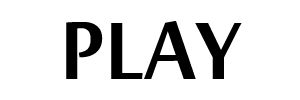
<style>
.page{position:relative;width:300px;height:100px;background:#ffffff}
.page>*{position:absolute;margin:0}
.t1{font:125px "MoolBoran";color:#000000}
</style>
<div class="page">
<p class="t1" style="left:66px;top:21px;width:176px;height:58px">PLAY</p>
</div>
